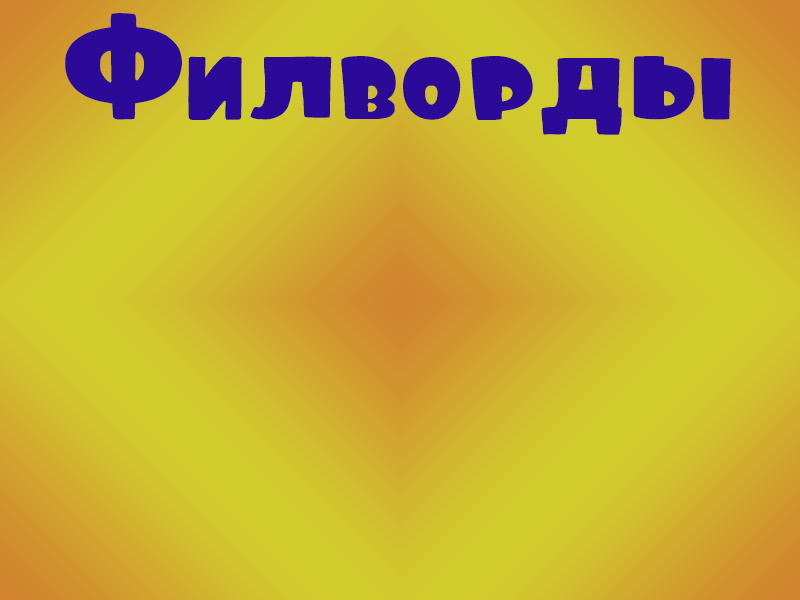
<style>
.page{position:relative;width:800px;height:600px}
.page>*{position:absolute;margin:0}
.t1{font:128px "soft-Bold";color:#2b0a98;scale:1.1 1}
</style>
<div class="page">
<p class="t1" style="left:65px;top:13px;width:666px;height:122px">Филворды</p>
</div>
